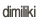
<style>
.page{position:relative;width:36px;height:18px;background:#ffffff}
.page>*{position:absolute;margin:0}
.t1{font:14px "GothicMB101Pro-Regular";letter-spacing:-0.08em;color:#4c4842;font-weight:bold;scale:0.8 1}
</style>
<div class="page">
<p class="t1" style="left:2px;top:5px;width:34px;height:13px">dimiliki</p>
</div>
